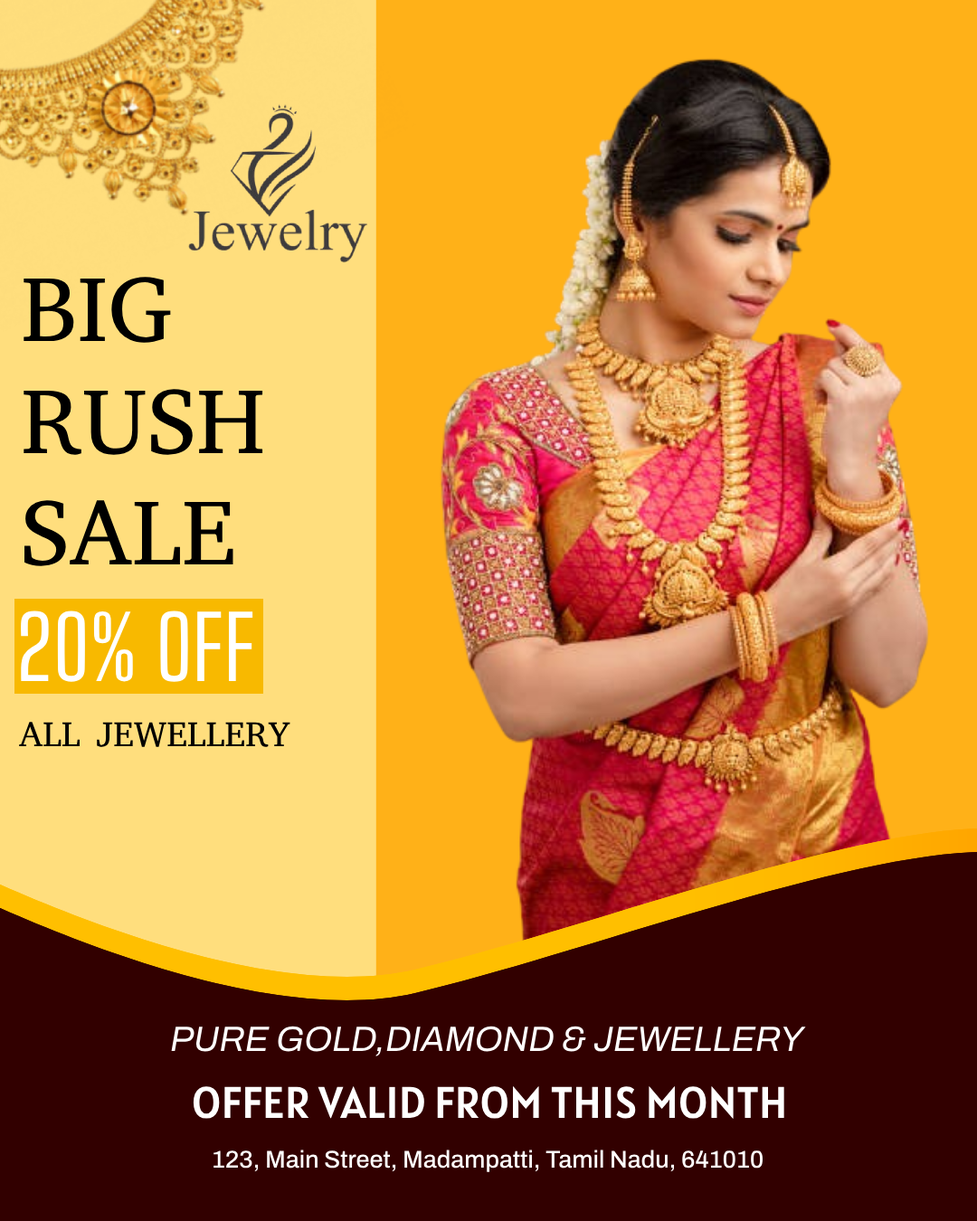
<style>
.page{position:relative;width:977px;height:1221px;background:#320000}
.page>*{position:absolute;margin:0}
.t1{font:93.1px "AbyssinicaSIL-Regular";color:#000000}
.t2{font:86.8px "BigShouldersText-Regular";color:#ffffff}
.t3{font:35.3px "AbyssinicaSIL-Regular";color:#000000}
.t4{font:35.3px "Archivo-Italic";color:#ffffff}
.t5{font:44.3px "Alatsi-Regular";color:#ffffff}
.t6{font:24.4px "Archivo-Medium";color:#ffffff}
</style>
<div class="page">
<p class="t1" style="left:24px;top:277px;width:239px;height:289px">BIG<br>RUSH<br>SALE</p>
<p class="t2" style="left:21px;top:610px;width:232px;height:72px">20% OFF</p>
<p class="t3" style="left:19px;top:722px;width:271px;height:25px">ALL JEWELLERY</p>
<p class="t4" style="left:171px;top:1026px;width:635px;height:30px">PURE GOLD,DIAMOND &amp; JEWELLERY</p>
<p class="t5" style="left:193px;top:1086px;width:591px;height:33px">OFFER VALID FROM THIS MONTH</p>
<p class="t6" style="left:213px;top:1149px;width:549px;height:23px">123, Main Street, Madampatti, Tamil Nadu, 641010</p>
</div>
